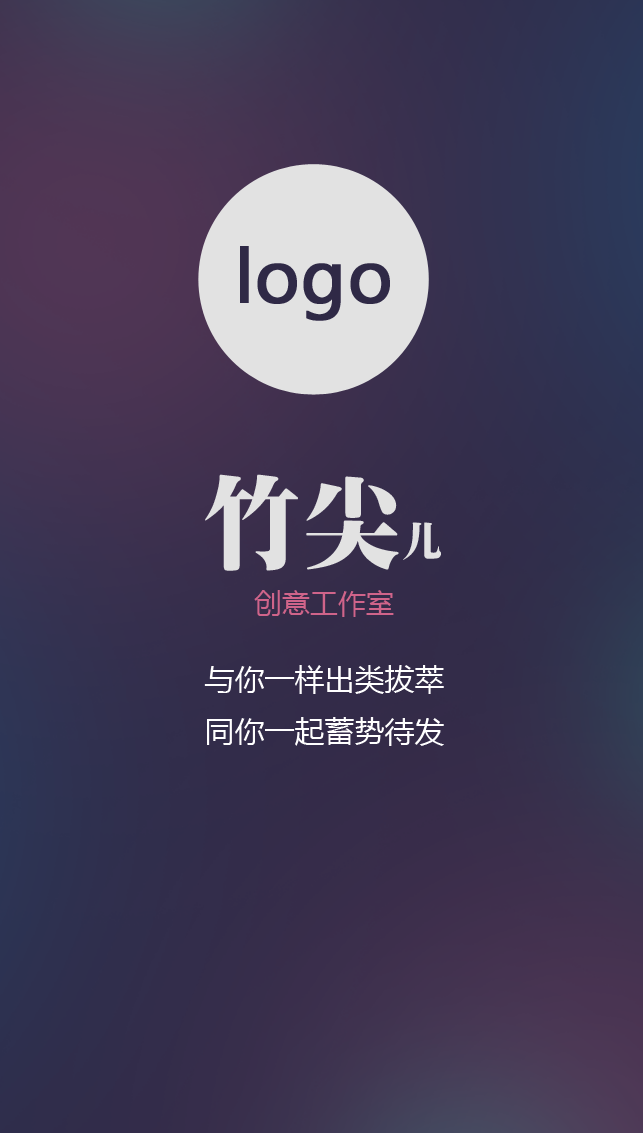
<style>
.page{position:relative;width:643px;height:1133px}
.page>*{position:absolute;margin:0}
.t1{font:70px "MicrosoftYaHei";color:#2f2946;font-weight:bold}
.t2{font:100px "¾­µäÌØËÎ¼ò Regular";color:#e2e2e2}
.t3{font:40px "¾­µäÌØËÎ¼ò Regular";color:#e2e2e2}
.t4{font:28px "MicrosoftYaHei";color:#d0648a}
.t5{font:30px "MicrosoftYaHei";color:#ffffff}
</style>
<div class="page">
<p class="t1" style="left:240px;top:246px;width:150px;height:75px">logo</p>
<p class="t2" style="left:205px;top:474px;width:236px;height:97px">竹尖<span class="t3">儿</span></p>
<p class="t4" style="left:254px;top:590px;width:140px;height:27px">创意工作室</p>
<p class="t5" style="left:204px;top:665px;width:240px;height:81px;text-align:center">与你一样出类拔萃<br>同你一起蓄势待发</p>
</div>
